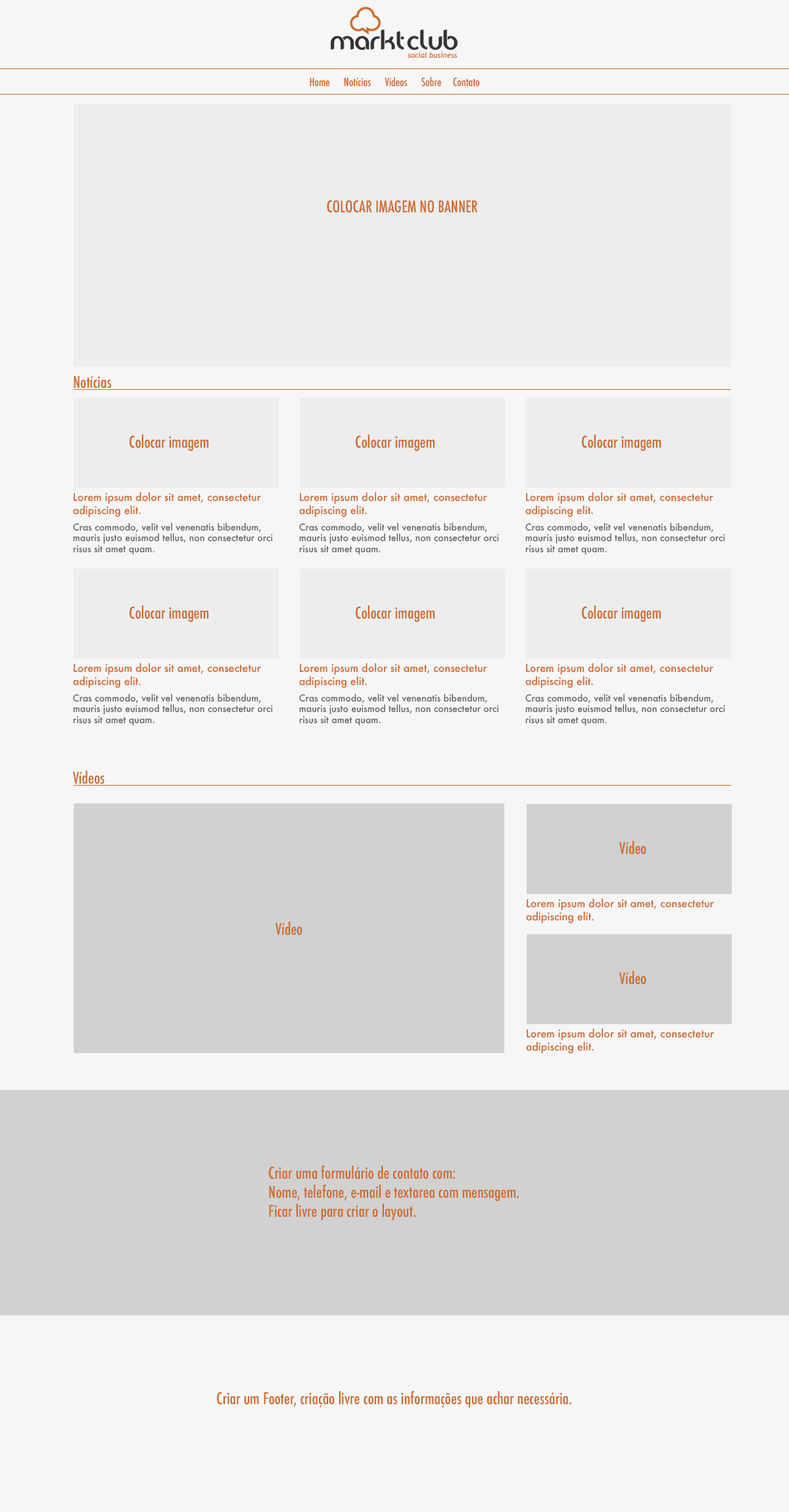
<style>
.page{position:relative;width:789px;height:1512px;background:#f6f6f6}
.page>*{position:absolute;margin:0}
.t1{font:11.2px "Futura-CondensedMedium";color:#ce6b2f}
.t2{font:15.8px "Futura-CondensedMedium";color:#ce6b2f}
.t3{font:10.5px "Futura-Medium";color:#ce6b2f}
.t4{font:9.2px "Futura-Medium";color:#666666}
</style>
<div class="page">
<p class="t1" style="left:310px;top:76px;width:170px;height:11px">Home      Notícias      Vídeos      Sobre     Contato</p>
<p class="t2" style="left:327px;top:200px;width:150px;height:13px">COLOCAR IMAGEM NO BANNER</p>
<p class="t2" style="left:74px;top:376px;width:37px;height:12px">Notícias</p>
<p class="t2" style="left:129px;top:434px;width:79px;height:17px">Colocar imagem</p>
<p class="t2" style="left:356px;top:434px;width:78px;height:17px">Colocar imagem</p>
<p class="t2" style="left:582px;top:434px;width:79px;height:17px">Colocar imagem</p>
<p class="t3" style="left:73px;top:492px;width:188px;height:25px">Lorem ipsum dolor sit amet, consectetur<br>adipiscing elit.</p>
<p class="t3" style="left:299px;top:492px;width:188px;height:25px">Lorem ipsum dolor sit amet, consectetur<br>adipiscing elit.</p>
<p class="t3" style="left:525px;top:492px;width:188px;height:25px">Lorem ipsum dolor sit amet, consectetur<br>adipiscing elit.</p>
<p class="t4" style="left:73px;top:523px;width:200px;height:32px">Cras commodo, velit vel venenatis bibendum, mauris justo euismod tellus, non consectetur orci risus sit amet quam.</p>
<p class="t4" style="left:299px;top:523px;width:200px;height:32px">Cras commodo, velit vel venenatis bibendum, mauris justo euismod tellus, non consectetur orci risus sit amet quam.</p>
<p class="t4" style="left:525px;top:523px;width:200px;height:32px">Cras commodo, velit vel venenatis bibendum, mauris justo euismod tellus, non consectetur orci risus sit amet quam.</p>
<p class="t2" style="left:129px;top:605px;width:79px;height:17px">Colocar imagem</p>
<p class="t2" style="left:356px;top:605px;width:78px;height:17px">Colocar imagem</p>
<p class="t2" style="left:582px;top:605px;width:79px;height:17px">Colocar imagem</p>
<p class="t3" style="left:73px;top:663px;width:188px;height:25px">Lorem ipsum dolor sit amet, consectetur<br>adipiscing elit.</p>
<p class="t3" style="left:299px;top:663px;width:188px;height:25px">Lorem ipsum dolor sit amet, consectetur<br>adipiscing elit.</p>
<p class="t3" style="left:525px;top:663px;width:188px;height:25px">Lorem ipsum dolor sit amet, consectetur<br>adipiscing elit.</p>
<p class="t4" style="left:73px;top:693px;width:200px;height:33px">Cras commodo, velit vel venenatis bibendum, mauris justo euismod tellus, non consectetur orci risus sit amet quam.</p>
<p class="t4" style="left:299px;top:693px;width:200px;height:33px">Cras commodo, velit vel venenatis bibendum, mauris justo euismod tellus, non consectetur orci risus sit amet quam.</p>
<p class="t4" style="left:525px;top:693px;width:200px;height:33px">Cras commodo, velit vel venenatis bibendum, mauris justo euismod tellus, non consectetur orci risus sit amet quam.</p>
<p class="t2" style="left:73px;top:770px;width:32px;height:14px">Vídeos</p>
<p class="t2" style="left:619px;top:841px;width:27px;height:13px">Vídeo</p>
<p class="t3" style="left:526px;top:898px;width:188px;height:26px">Lorem ipsum dolor sit amet, consectetur<br>adipiscing elit.</p>
<p class="t2" style="left:275px;top:922px;width:27px;height:13px">Vídeo</p>
<p class="t2" style="left:619px;top:971px;width:27px;height:14px">Vídeo</p>
<p class="t3" style="left:526px;top:1028px;width:188px;height:26px">Lorem ipsum dolor sit amet, consectetur<br>adipiscing elit.</p>
<p class="t2" style="left:269px;top:1165px;width:250px;height:55px">Criar uma formulário de contato com:<br>Nome, telefone, e-mail e textarea com mensagem.<br>Ficar livre para criar o layout.</p>
<p class="t2" style="left:217px;top:1390px;width:354px;height:17px">Criar um Footer, criação livre com as informações que achar necessária.</p>
</div>
